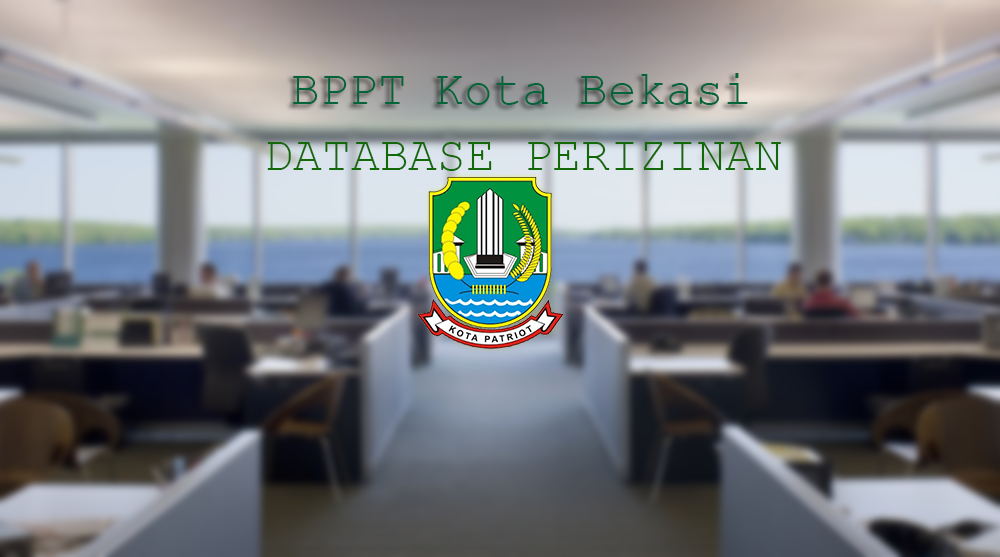
<style>
.page{position:relative;width:1000px;height:557px}
.page>*{position:absolute;margin:0}
.t1{font:48px "CourierNewPSMT";color:#02653a}
.t2{font:48px "CourierNewPSMT";color:#136907}
</style>
<div class="page">
<p class="t1" style="left:293px;top:73px;width:455px;height:32px">BPPT Kota Bekasi</p>
<p class="t2" style="left:267px;top:142px;width:514px;height:29px">DATABASE PERIZINAN</p>
</div>
